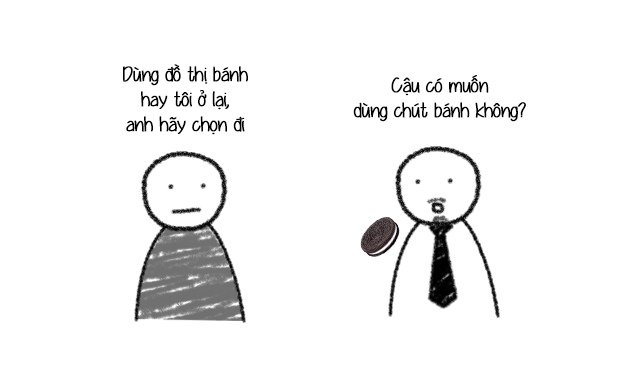
<style>
.page{position:relative;width:617px;height:375px;background:#ffffff}
.page>*{position:absolute;margin:0}
.t1{font:20.8px "UVFYummyCupcakes";letter-spacing:-0.02em;color:#000000;font-weight:bold}
</style>
<div class="page">
<p class="t1" style="left:123px;top:64px;width:125px;height:71px;text-align:center">Dùng đồ thị bánh<br>hay tôi ở lại,<br>anh hãy chọn đi</p>
<p class="t1" style="left:353px;top:75px;width:173px;height:47px;text-align:center">Cậu có muốn<br>dùng chút bánh không?</p>
</div>
